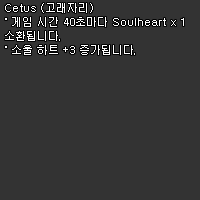
<style>
.page{position:relative;width:200px;height:200px;background:#333333}
.page>*{position:absolute;margin:0}
.t1{font:11px/14px "Dotum";color:#ffffff}
</style>
<div class="page">
<p class="t1" style="left:5px;top:3px;width:179px;height:52px">Cetus (고래자리)<br>˚ 게임 시간 40초마다 Soulheart x 1<br>소환됩니다.<br>˚ 소울 하트 +3 증가됩니다.</p>
</div>
